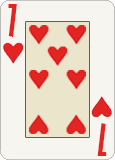
<style>
.page{position:relative;width:115px;height:160px;background:#f7f5ef}
.page>*{position:absolute;margin:0}
.t1{font:41.7px "GillSansMT-ExtraCondensedBold";color:#e22523}
</style>
<div class="page">
<p class="t1" style="left:8px;top:4px;width:9px;height:33px">7</p>
<p class="t1" style="left:97px;top:123px;width:10px;height:33px;rotate:180deg">7</p>
</div>
